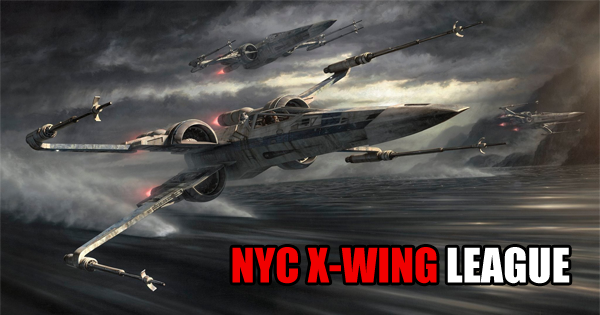
<style>
.page{position:relative;width:600px;height:315px}
.page>*{position:absolute;margin:0}
.t1{font:44px "Impact";color:#f10101}
.t2{font:44px "Impact";color:#ffffff}
</style>
<div class="page">
<p class="t1" style="left:232px;top:247px;width:338px;height:37px">NYC X-WING<span class="t2"> LEAGUE</span></p>
</div>
